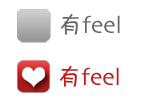
<style>
.page{position:relative;width:142px;height:103px;background:#ffffff}
.page>*{position:absolute;margin:0}
.t1{font:24px "Skia-Regular";color:#666666}
.t2{font:24px "FZKATFW--GB1-0";color:#666666}
.t3{font:24px "Skia-Regular";color:#be1a1a}
.t4{font:24px "FZKATFW--GB1-0";color:#be1a1a}
</style>
<div class="page">
<p class="t1" style="left:60px;top:13px;width:60px;height:22px"><span class="t2">有</span>feel</p>
<p class="t3" style="left:59px;top:65px;width:60px;height:22px"><span class="t4">有</span>feel</p>
</div>
